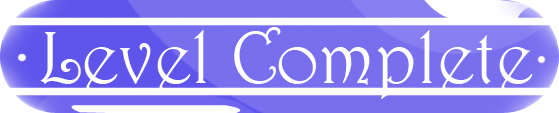
<style>
.page{position:relative;width:559px;height:113px;background:#786fef}
.page>*{position:absolute;margin:0}
.t1{font:75px "Harrington";color:#ffffff}
</style>
<div class="page">
<p class="t1" style="left:40px;top:27px;width:493px;height:72px">Level Complete</p>
</div>
